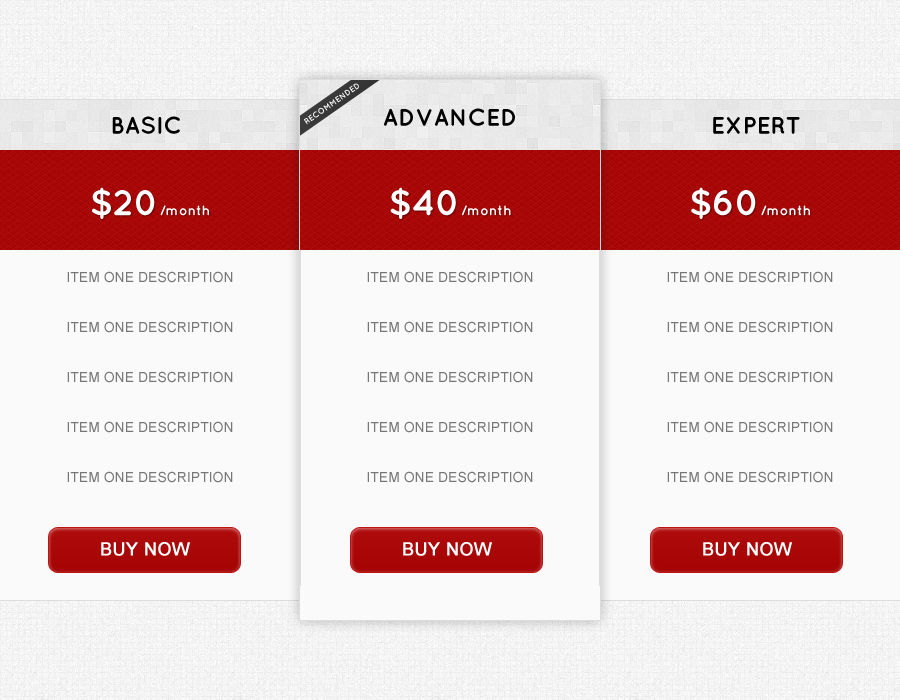
<style>
.page{position:relative;width:900px;height:700px;background:#fafafa}
.page>*{position:absolute;margin:0}
.t1{font:24px "QuicksandBold-Regular";color:#000000;text-transform:uppercase}
.t2{font:14px "QuicksandBold-Regular";color:#ffffff}
.t3{font:36px "QuicksandBold-Regular";color:#ffffff}
.t4{font:14px "ArialMT";color:#777777;text-transform:uppercase}
.t5{font:18px "ArialMT";color:#ffffff;text-transform:uppercase;font-weight:bold}
</style>
<div class="page">
<p class="t1" style="left:384px;top:108px;width:131px;height:18px">Advanced</p>
<p class="t1" style="left:112px;top:116px;width:68px;height:18px">Basic</p>
<p class="t1" style="left:713px;top:117px;width:87px;height:17px">expert</p>
<p class="t2" style="left:92px;top:187px;width:117px;height:32px"><span class="t3">$20</span>/month</p>
<p class="t2" style="left:390px;top:187px;width:121px;height:32px"><span class="t3">$40</span>/month</p>
<p class="t2" style="left:691px;top:187px;width:119px;height:32px"><span class="t3">$60</span>/month</p>
<p class="t4" style="left:67px;top:271px;width:166px;height:12px">Item one description</p>
<p class="t4" style="left:367px;top:271px;width:166px;height:12px">Item one description</p>
<p class="t4" style="left:667px;top:271px;width:166px;height:12px">Item one description</p>
<p class="t4" style="left:67px;top:321px;width:166px;height:12px">Item one description</p>
<p class="t4" style="left:367px;top:321px;width:166px;height:12px">Item one description</p>
<p class="t4" style="left:667px;top:321px;width:166px;height:12px">Item one description</p>
<p class="t4" style="left:67px;top:371px;width:166px;height:12px">Item one description</p>
<p class="t4" style="left:367px;top:371px;width:166px;height:12px">Item one description</p>
<p class="t4" style="left:667px;top:371px;width:166px;height:12px">Item one description</p>
<p class="t4" style="left:67px;top:421px;width:166px;height:12px">Item one description</p>
<p class="t4" style="left:367px;top:421px;width:166px;height:12px">Item one description</p>
<p class="t4" style="left:667px;top:421px;width:166px;height:12px">Item one description</p>
<p class="t4" style="left:67px;top:471px;width:166px;height:12px">Item one description</p>
<p class="t4" style="left:367px;top:471px;width:166px;height:12px">Item one description</p>
<p class="t4" style="left:667px;top:471px;width:166px;height:12px">Item one description</p>
<p class="t5" style="left:101px;top:542px;width:89px;height:14px">BUY NOW</p>
<p class="t5" style="left:403px;top:542px;width:89px;height:14px">BUY NOW</p>
<p class="t5" style="left:703px;top:542px;width:89px;height:14px">BUY NOW</p>
</div>
